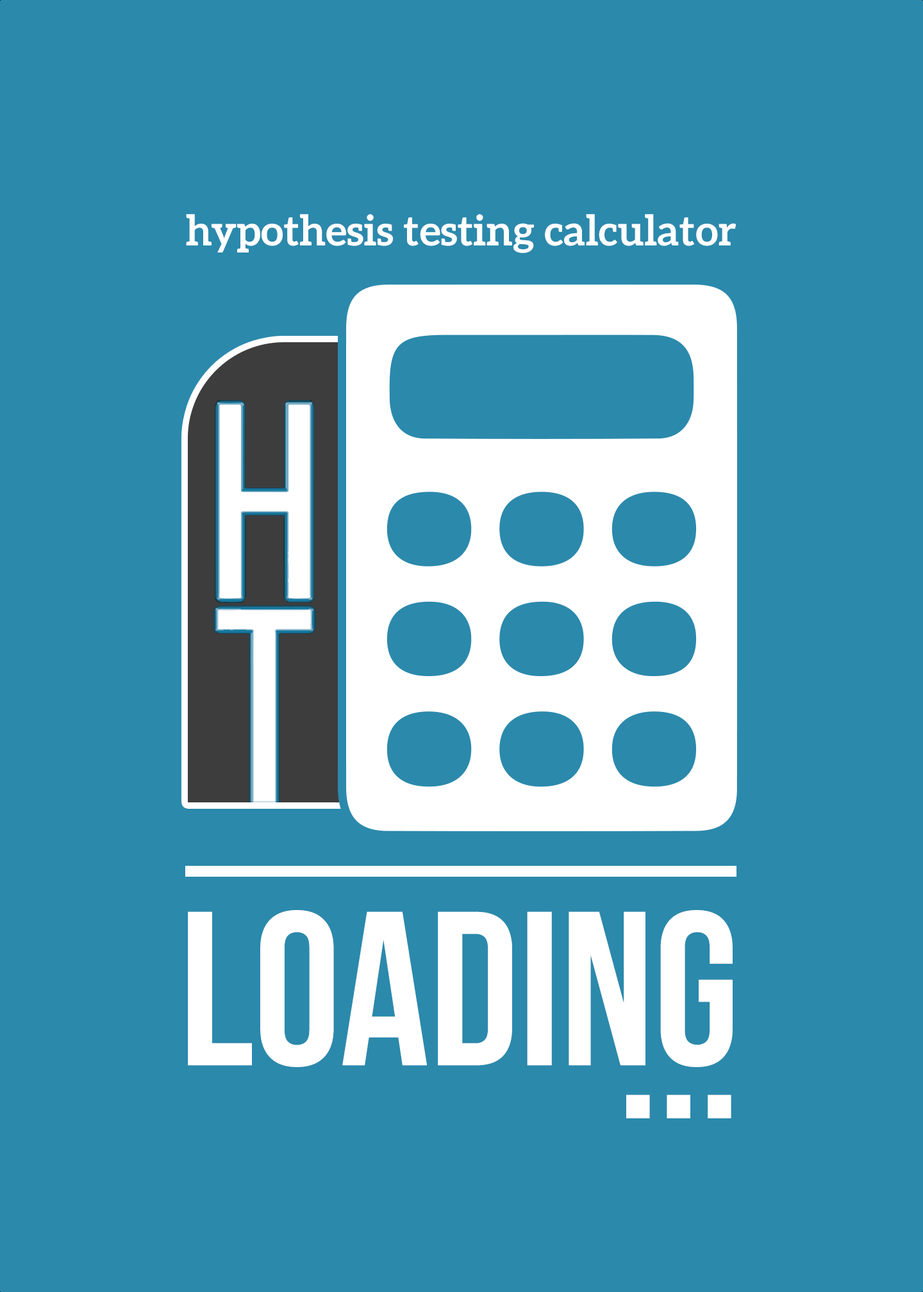
<style>
.page{position:relative;width:923px;height:1292px;background:#2b89ac}
.page>*{position:absolute;margin:0}
.t1{font:42px "Aleo-Bold";color:#ffffff}
.t2{font:219.1px "BebasNeueBold";color:#ffffff}
</style>
<div class="page">
<p class="t1" style="left:186px;top:214px;width:550px;height:39px">hypothesis testing calculator</p>
<p class="t2" style="left:188px;top:910px;width:545px;height:157px">LOADING</p>
<p class="t2" style="left:626px;top:1095px;width:105px;height:23px">...</p>
</div>
